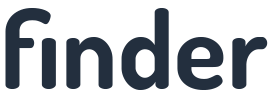
<style>
.page{position:relative;width:278px;height:98px;background:#ffffff}
.page>*{position:absolute;margin:0}
.t1{font:108.3px "Dosis-Bold";color:#232f3e}
</style>
<div class="page">
<p class="t1" style="left:5px;top:8px;width:263px;height:82px">finder</p>
</div>
